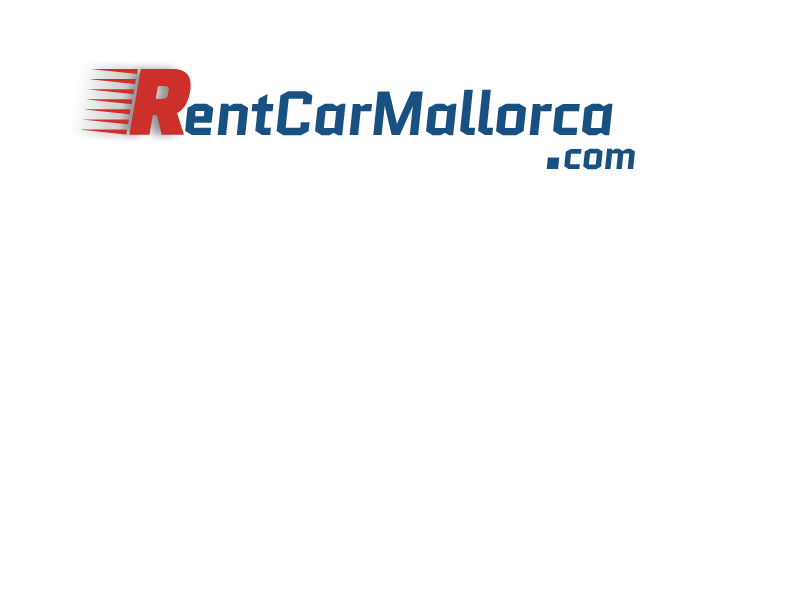
<style>
.page{position:relative;width:800px;height:600px;background:#ffffff}
.page>*{position:absolute;margin:0}
.t1{font:105px "FasterOne-Regular";letter-spacing:-0.04em;color:#cd2f2a}
.t2{font:62px "Quantico-BoldItalic";letter-spacing:-0.04em;color:#175081}
.t3{font:40px "Quantico-BoldItalic";letter-spacing:-0.04em;color:#175081}
.t4{font:60px "Quantico-BoldItalic";letter-spacing:-0.04em;color:#175081}
</style>
<div class="page">
<p class="t1" style="left:81px;top:69px;width:110px;height:66px">R</p>
<p class="t2" style="left:185px;top:89px;width:428px;height:47px">entCarMallorca</p>
<p class="t3" style="left:564px;top:148px;width:71px;height:22px">com</p>
<p class="t4" style="left:546px;top:157px;width:14px;height:12px">.</p>
</div>
